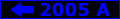
<style>
.page{position:relative;width:120px;height:19px;background:#000000}
.page>*{position:absolute;margin:0}
.t1{font:17.9px "Verdana-Bold";color:#0000ff}
</style>
<div class="page">
<p class="t1" style="left:40px;top:2px;width:70px;height:15px">2005 A</p>
</div>
